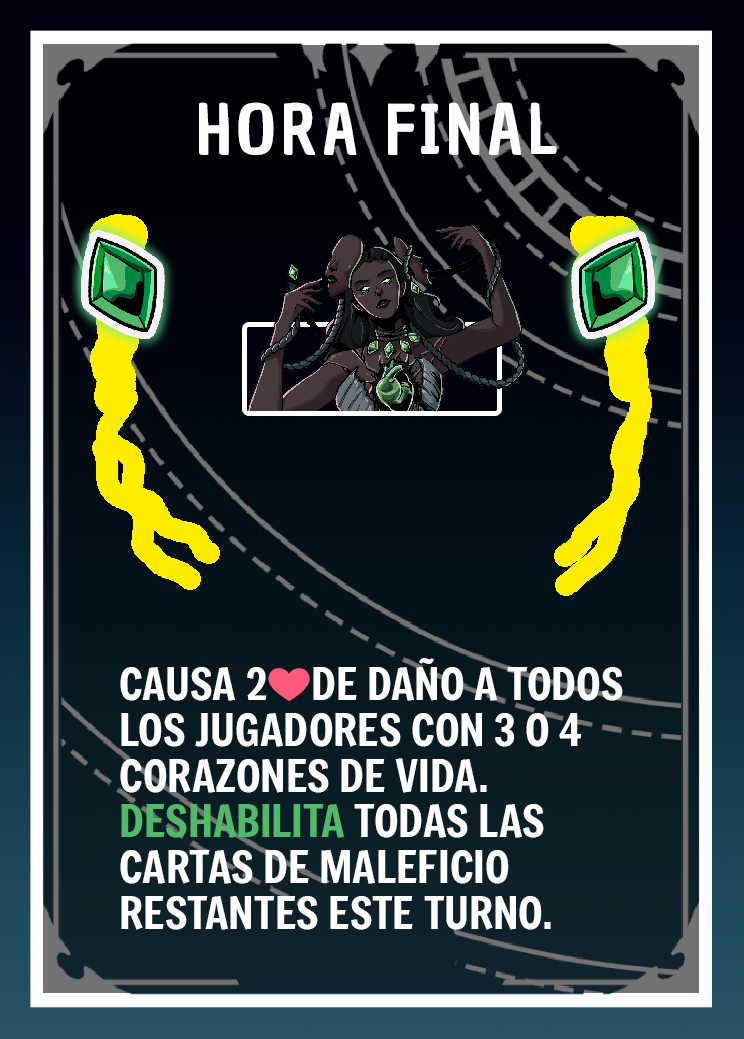
<style>
.page{position:relative;width:744px;height:1039px}
.page>*{position:absolute;margin:0}
.t1{font:66.7px "ChauPhilomeneOne-Regular";letter-spacing:0.075em;color:#ffffff}
.t2{font:43.7px/45.8px "Freeman-Regular";color:#ffffff}
.t3{font:43.7px/45.8px "EmojiOneColor";color:#ffffff}
.t4{font:43.7px/45.8px "Freeman-Regular";color:#51b96a}
</style>
<div class="page">
<p class="t1" style="left:199px;top:102px;width:358px;height:53px">HORA FINAL</p>
<p class="t2" style="left:120px;top:658px;width:503px;height:272px">CAUSA 2<span class="t3">❤️</span>DE DAÑO A TODOS LOS JUGADORES CON 3 O 4 CORAZONES DE VIDA. <span class="t4">DESHABILITA </span>TODAS LAS CARTAS DE MALEFICIO RESTANTES ESTE TURNO.</p>
</div>
